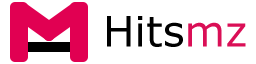
<style>
.page{position:relative;width:256px;height:64px;background:#ffffff}
.page>*{position:absolute;margin:0}
.t1{font:42px "Verdana";color:#000000}
.t2{font:42px "Verdana";color:#da0f56}
</style>
<div class="page">
<p class="t1" style="left:107px;top:16px;width:139px;height:31px">Hits<span class="t2">mz</span></p>
</div>
